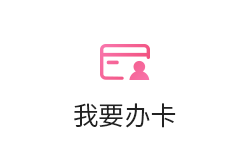
<style>
.page{position:relative;width:250px;height:168px;background:#ffffff}
.page>*{position:absolute;margin:0}
.t1{font:26px "SourceHanSansCN-Normal";color:#222222}
</style>
<div class="page">
<p class="t1" style="left:74px;top:103px;width:102px;height:25px">我要办卡</p>
</div>
